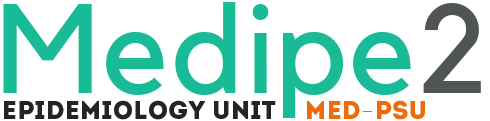
<style>
.page{position:relative;width:490px;height:121px;background:#ffffff}
.page>*{position:absolute;margin:0}
.t1{font:124.6px "Kollektif";letter-spacing:0.025em;color:#19bb97}
.t2{font:124.6px "Kollektif";letter-spacing:0.025em;color:#505554}
.t3{font:25.6px "Intro";color:#242424}
.t4{font:25.6px "Intro";color:#ef6a08}
.t5{font:25.6px "BangnaNew";color:#ef6a08}
</style>
<div class="page">
<p class="t1" style="left:3px;top:2px;width:478px;height:116px">Medipe<span class="t2">2</span></p>
<p class="t3" style="left:4px;top:100px;width:421px;height:20px">Epidemiology Unit    <span class="t4">Med</span><span class="t5">-</span><span class="t4">PSU</span></p>
</div>
